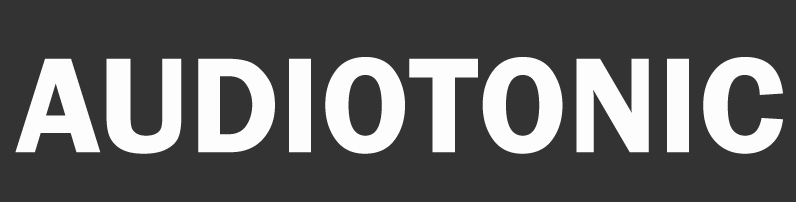
<style>
.page{position:relative;width:796px;height:202px;background:#333333}
.page>*{position:absolute;margin:0}
.t1{font:140px "FranklinGothic-Demi";color:#fdfdfd}
</style>
<div class="page">
<p class="t1" style="left:15px;top:57px;width:768px;height:97px">AUDIOTONIC</p>
</div>
